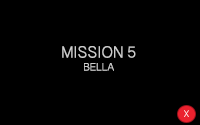
<style>
.page{position:relative;width:200px;height:125px;background:#000000}
.page>*{position:absolute;margin:0}
.t1{font:18px/13px "OriyaSangamMN";color:#cccccc}
.t2{font:12px/13px "OriyaSangamMN";color:#cccccc}
.t3{font:11px "OriyaSangamMN";color:#ffffff}
</style>
<div class="page">
<p class="t1" style="left:62px;top:46px;width:74px;height:25px;text-align:center">MISSION 5<br><span class="t2">BELLA</span></p>
<p class="t3" style="left:184px;top:110px;width:5px;height:7px">X</p>
</div>
